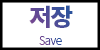
<style>
.page{position:relative;width:100px;height:50px;background:#ffffff}
.page>*{position:absolute;margin:0}
.t1{font:24.3px "NotoSansCJKkr-Black";letter-spacing:-0.04em}
.t2{font:11.4px "NotoSansCJKkr-Light";letter-spacing:-0.04em}
</style>
<div class="page">
<p class="t1" style="left:29px;top:5px;width:44px;height:23px">저장</p>
<p class="t2" style="left:39px;top:36px;width:23px;height:9px">Save</p>
</div>
